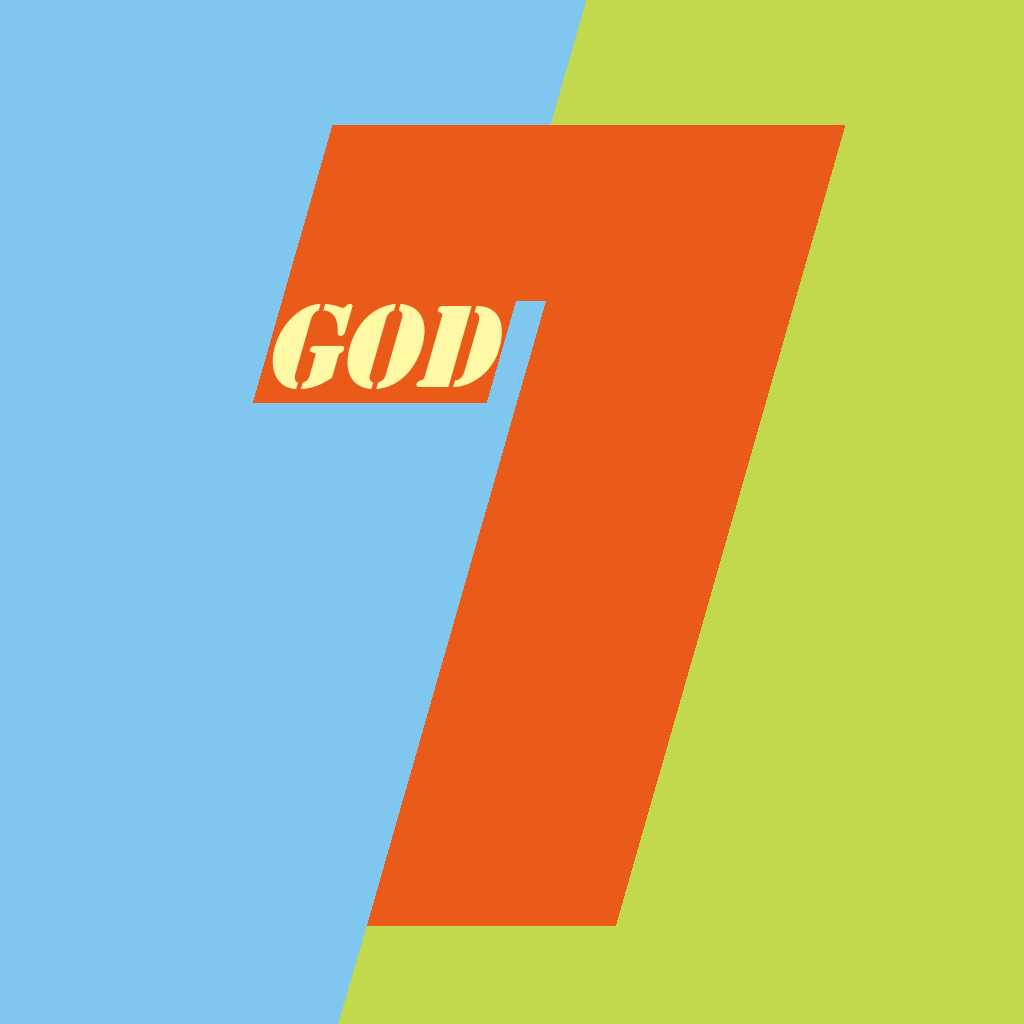
<style>
.page{position:relative;width:1024px;height:1024px;background:#7fc7ef}
.page>*{position:absolute;margin:0}
.t1{font:112.4px "StencilStd";color:#fff8a5;scale:0.96 1}
</style>
<div class="page">
<p class="t1" style="left:272px;top:304px;width:230px;height:85px">GOD</p>
</div>
